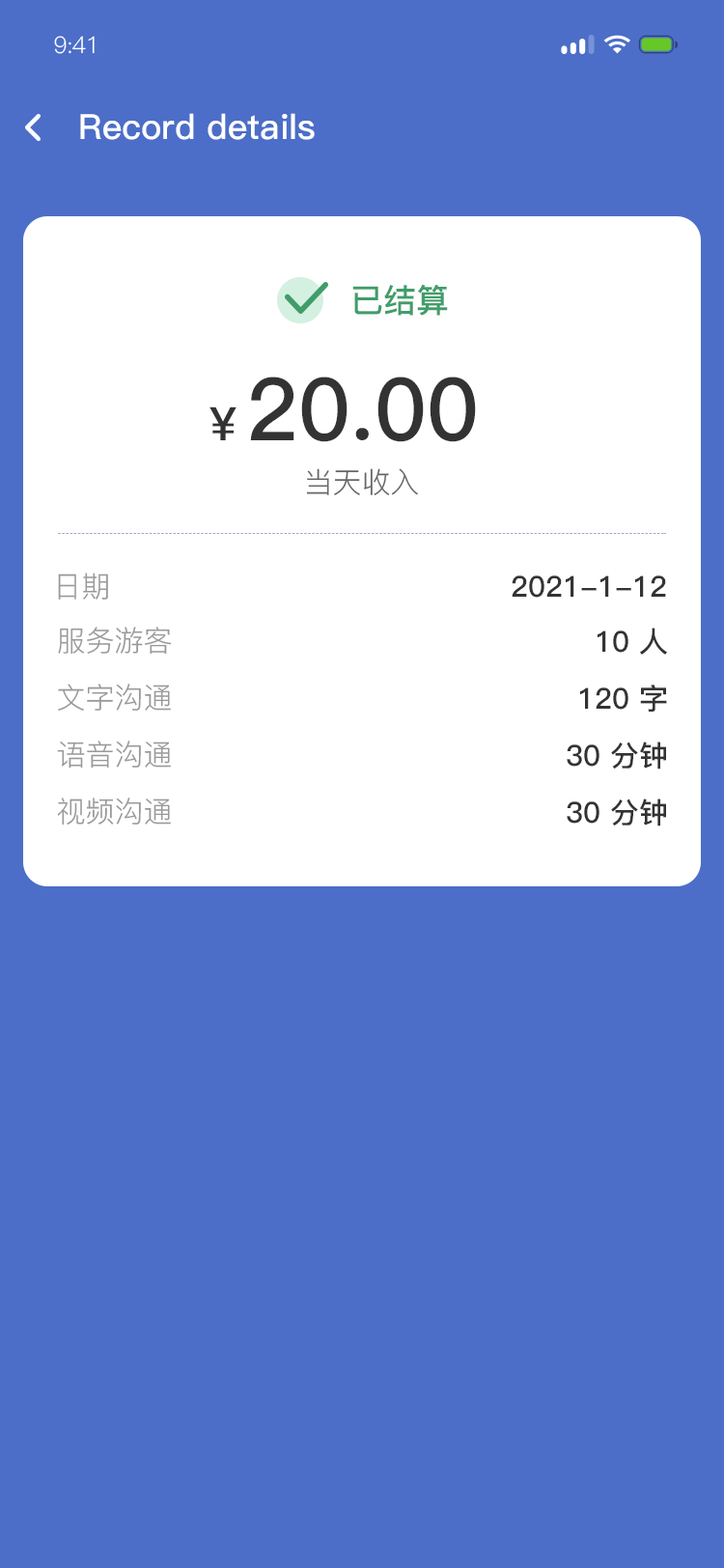
<style>
.page{position:relative;width:724px;height:1568px;background:#4c6ec8}
.page>*{position:absolute;margin:0}
.t1{font:23.2px "PingFang-SC-Regular";letter-spacing:-0.025em;color:#ffffff}
.t2{font:34.8px "PingFang-SC-Bold";color:#ffffff}
.t3{font:34.8px "PingFang-SC-Bold";color:#ffffff;text-transform:uppercase}
.t4{font:32.8px "PingFang-SC-Bold";color:#409d6a}
.t5{font:86.9px "PingFang-SC-Bold";color:#333333}
.t6{font:46.3px "PingFang-SC-Bold";color:#333333}
.t7{font:29px "PingFang-SC-Regular";color:#666666}
.t8{font:29px "PingFang-SC-Regular";color:#999999}
.t9{font:29px "PingFang-SC-Bold";color:#333333}
</style>
<div class="page">
<p class="t1" style="left:54px;top:36px;width:41px;height:18px">9:41</p>
<p class="t2" style="left:80px;top:113px;width:235px;height:27px"><span class="t3">r</span>ecord details</p>
<p class="t4" style="left:352px;top:284px;width:96px;height:32px">已结算</p>
<p class="t5" style="left:210px;top:377px;width:266px;height:65px"><span class="t6">￥</span>20.00</p>
<p class="t7" style="left:306px;top:468px;width:112px;height:27px">当天收入</p>
<p class="t8" style="left:58px;top:573px;width:50px;height:27px">日期</p>
<p class="t9" style="left:512px;top:575px;width:154px;height:23px">2021-1-12</p>
<p class="t8" style="left:58px;top:627px;width:114px;height:28px">服务游客</p>
<p class="t9" style="left:598px;top:628px;width:69px;height:27px">10 人</p>
<p class="t8" style="left:58px;top:684px;width:113px;height:27px">文字沟通</p>
<p class="t9" style="left:580px;top:685px;width:87px;height:27px">120 字</p>
<p class="t8" style="left:57px;top:741px;width:114px;height:28px">语音沟通</p>
<p class="t9" style="left:567px;top:742px;width:99px;height:28px">30 分钟</p>
<p class="t8" style="left:57px;top:798px;width:114px;height:28px">视频沟通</p>
<p class="t9" style="left:567px;top:798px;width:99px;height:28px">30 分钟</p>
</div>
